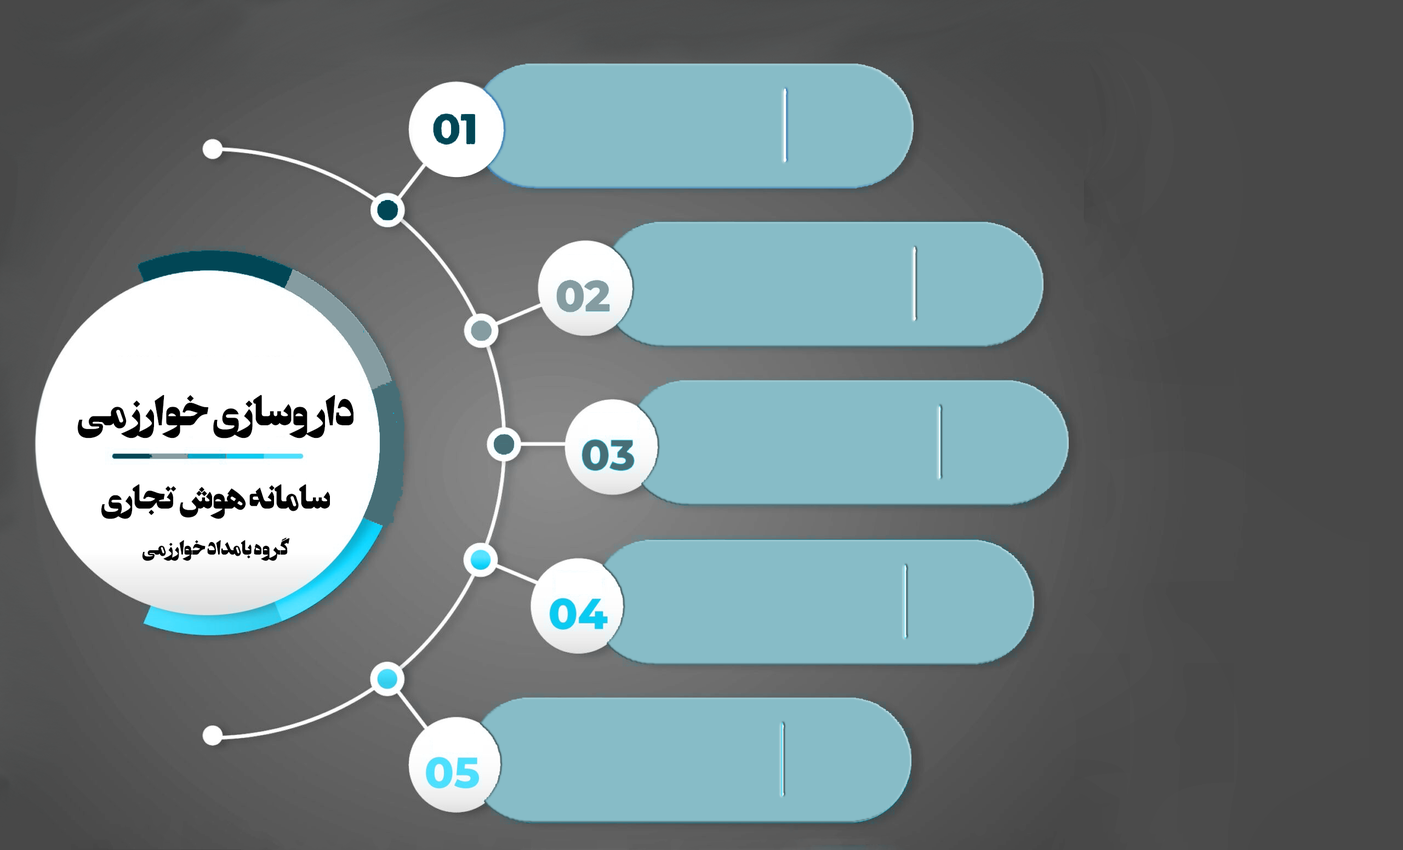
<style>
.page{position:relative;width:1403px;height:850px}
.page>*{position:absolute;margin:0}
.t1{font:54.8px "Ordibehesht-bold";color:#000000}
.t2{font:43.8px "Ordibehesht-bold";color:#000000}
.t3{font:26.3px "Ordibehesht-bold";color:#000000}
</style>
<div class="page">
<p class="t1" style="left:77px;top:395px;width:276px;height:43px">داروسازی خوارزمی</p>
<p class="t2" style="left:101px;top:484px;width:229px;height:35px">سامانه هوش تجاری</p>
<p class="t3" style="left:142px;top:537px;width:148px;height:24px">گروه بامداد خوارزمی</p>
</div>
